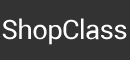
<style>
.page{position:relative;width:130px;height:60px;background:#333333}
.page>*{position:absolute;margin:0}
.t1{font:26.8px "Roboto-Regular";letter-spacing:-0.025em;color:#ffffff}
</style>
<div class="page">
<p class="t1" style="left:2px;top:18px;width:125px;height:27px">ShopClass</p>
</div>
